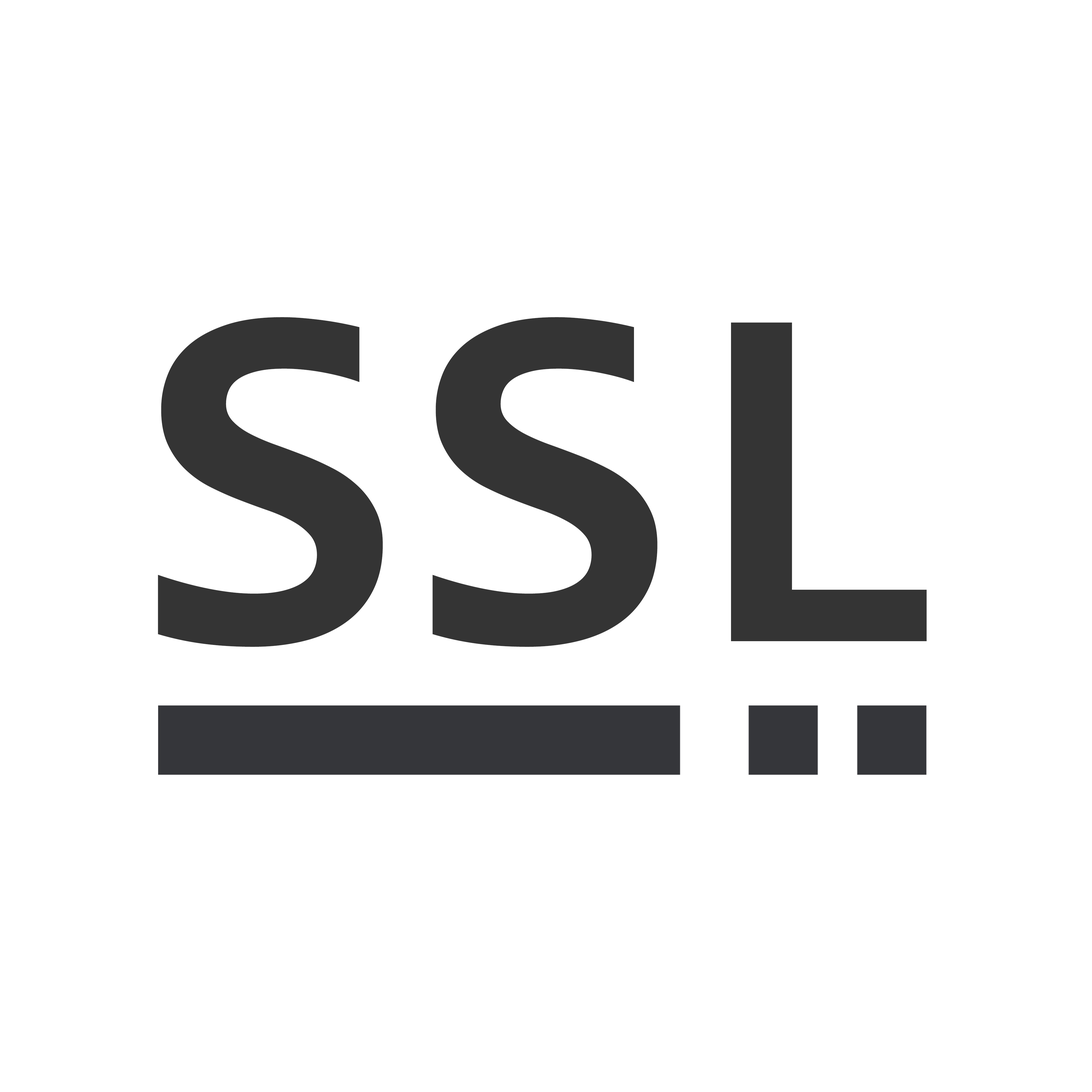
<style>
.page{position:relative;width:1092px;height:1092px;background:#ffffff}
.page>*{position:absolute;margin:0}
.t1{font:499.3px "Consolas-Bold";color:#343434}
</style>
<div class="page">
<p class="t1" style="left:158px;top:317px;width:769px;height:330px">SSL</p>
</div>
